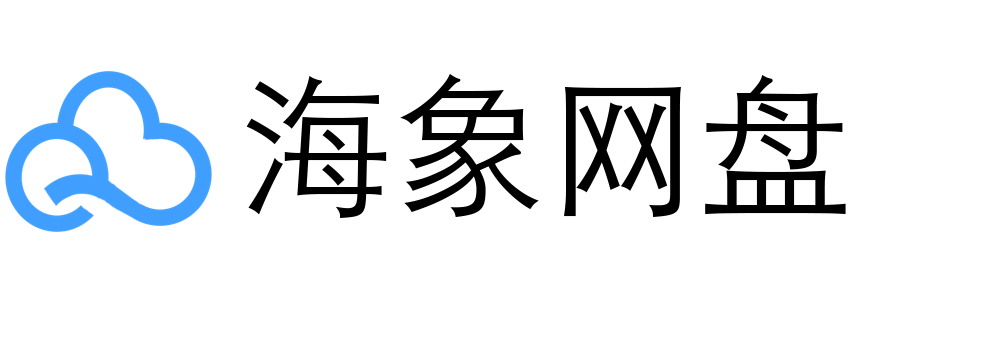
<style>
.page{position:relative;width:999px;height:351px;background:#ffffff}
.page>*{position:absolute;margin:0}
.t1{font:153px "STHeitiSC-Light";color:#000000}
</style>
<div class="page">
<p class="t1" style="left:246px;top:74px;width:600px;height:144px">海象网盘</p>
</div>
